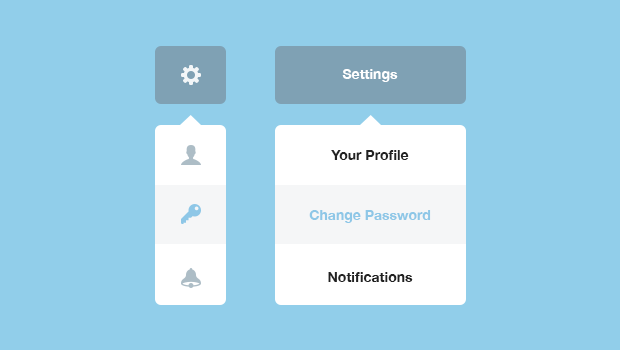
<style>
.page{position:relative;width:620px;height:350px;background:#91ceea}
.page>*{position:absolute;margin:0}
.t1{font:14px "HelveticaNeue-Bold";color:#ffffff}
.t2{font:14px "HelveticaNeue-Bold";color:#222222}
.t3{font:14px "HelveticaNeue-Bold";color:#8ec7e7}
</style>
<div class="page">
<p class="t1" style="left:342px;top:69px;width:56px;height:13px">Settings</p>
<p class="t2" style="left:331px;top:150px;width:78px;height:10px">Your Profile</p>
<p class="t3" style="left:309px;top:210px;width:122px;height:13px">Change Password</p>
<p class="t2" style="left:328px;top:272px;width:85px;height:10px">Notifications</p>
</div>
